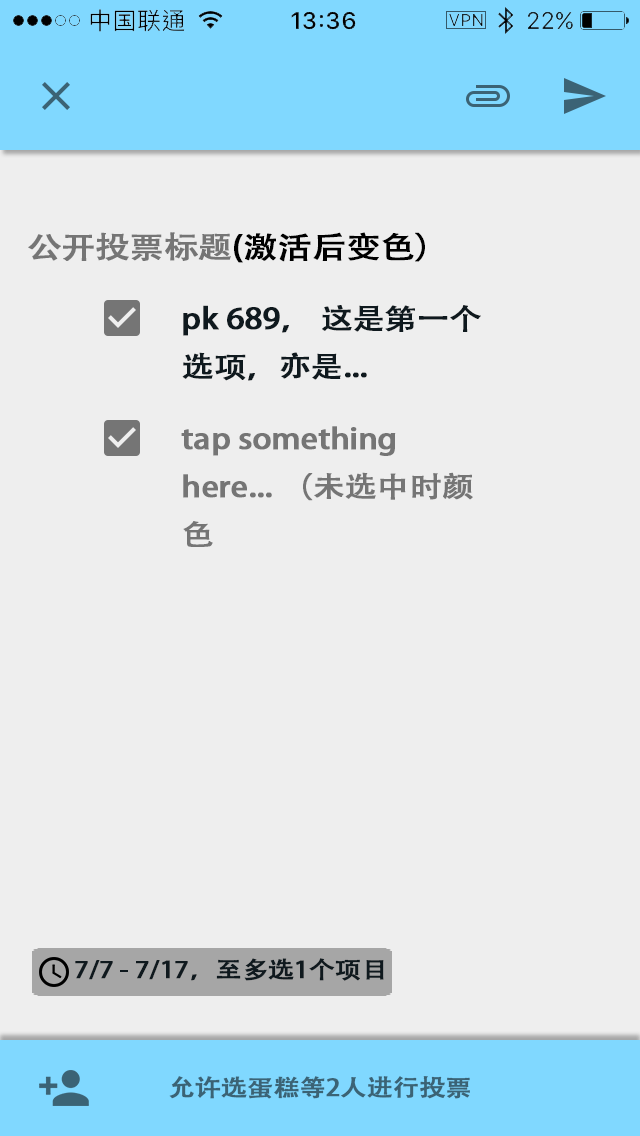
<style>
.page{position:relative;width:640px;height:1136px;background:#eeeeee}
.page>*{position:absolute;margin:0}
.t1{font:30.3px "AdobeHeitiStd-Regular";letter-spacing:-0.02em;color:#000000;font-weight:bold;scale:1.12 1}
.t2{font:30.3px "AdobeHeitiStd-Regular";letter-spacing:-0.02em;color:#757575;font-weight:bold;scale:1.12 1}
.t3{font:28.5px/48px "AdobeHeitiStd-Regular";letter-spacing:-0.02em;color:#0f191e;font-weight:bold;scale:1.12 1}
.t4{font:28.5px/48px "AdobeHeitiStd-Regular";letter-spacing:-0.02em;color:#757575;font-weight:bold;scale:1.12 1}
.t5{font:23.1px "AdobeHeitiStd-Regular";letter-spacing:-0.02em;color:#0f191e;font-weight:bold;scale:1.12 1}
.t6{font:23.1px "AdobeHeitiStd-Regular";letter-spacing:-0.02em;color:#3b6375;font-weight:bold;scale:1.12 1}
</style>
<div class="page">
<p class="t1" style="left:28px;top:232px;width:397px;height:31px"><span class="t2">公开投票标题</span>(激活后变色）</p>
<p class="t3" style="left:182px;top:305px;width:299px;height:76px">pk 689， 这是第一个选项，亦是...</p>
<p class="t4" style="left:181px;top:426px;width:292px;height:121px">tap something here... （未选中时颜色</p>
<p class="t5" style="left:75px;top:958px;width:309px;height:23px">7/7 - 7/17，至多选1个项目</p>
<p class="t6" style="left:169px;top:1076px;width:301px;height:23px">允许选蛋糕等2人进行投票</p>
</div>
